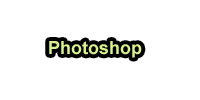
<style>
.page{position:relative;width:200px;height:100px;background:#ffffff}
.page>*{position:absolute;margin:0}
.t1{font:18px "Arial-BoldMT";color:#d9f191}
</style>
<div class="page">
<p class="t1" style="left:49px;top:41px;width:93px;height:17px">Photoshop</p>
</div>
